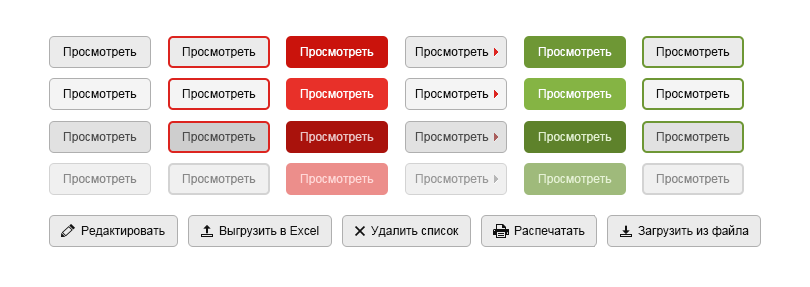
<style>
.page{position:relative;width:810px;height:287px;background:#ffffff}
.page>*{position:absolute;margin:0}
.t1{font:12px "ArialMT";color:#111111}
.t2{font:12px "ArialMT";color:#ffffff}
.t3{font:12px "ArialMT";color:#4c4c4c}
.t4{font:12px "ArialMT";color:#edc2c2}
.t5{font:12px "ArialMT";color:#e1f0cd}
.t6{font:12px "ArialMT";color:#888888}
.t7{font:12px "ArialMT";color:#ffd8d7}
.t8{font:12px "ArialMT";color:#999999}
.t9{font:12px "ArialMT";color:#e5f1d4}
</style>
<div class="page">
<p class="t1" style="left:63px;top:47px;width:74px;height:11px">Просмотреть</p>
<p class="t1" style="left:182px;top:47px;width:74px;height:11px">Просмотреть</p>
<p class="t2" style="left:300px;top:47px;width:74px;height:11px">Просмотреть</p>
<p class="t1" style="left:415px;top:47px;width:74px;height:11px">Просмотреть</p>
<p class="t2" style="left:538px;top:47px;width:74px;height:11px">Просмотреть</p>
<p class="t1" style="left:656px;top:47px;width:74px;height:11px">Просмотреть</p>
<p class="t1" style="left:63px;top:89px;width:74px;height:11px">Просмотреть</p>
<p class="t1" style="left:182px;top:89px;width:74px;height:11px">Просмотреть</p>
<p class="t2" style="left:300px;top:89px;width:74px;height:11px">Просмотреть</p>
<p class="t1" style="left:415px;top:89px;width:74px;height:11px">Просмотреть</p>
<p class="t2" style="left:538px;top:89px;width:74px;height:11px">Просмотреть</p>
<p class="t1" style="left:656px;top:89px;width:74px;height:11px">Просмотреть</p>
<p class="t3" style="left:63px;top:132px;width:74px;height:11px">Просмотреть</p>
<p class="t3" style="left:182px;top:132px;width:74px;height:11px">Просмотреть</p>
<p class="t4" style="left:300px;top:132px;width:74px;height:11px">Просмотреть</p>
<p class="t3" style="left:415px;top:132px;width:74px;height:11px">Просмотреть</p>
<p class="t5" style="left:538px;top:132px;width:74px;height:11px">Просмотреть</p>
<p class="t3" style="left:656px;top:132px;width:74px;height:11px">Просмотреть</p>
<p class="t6" style="left:63px;top:174px;width:74px;height:11px">Просмотреть</p>
<p class="t6" style="left:182px;top:174px;width:74px;height:11px">Просмотреть</p>
<p class="t7" style="left:300px;top:174px;width:74px;height:11px">Просмотреть</p>
<p class="t8" style="left:415px;top:174px;width:74px;height:11px">Просмотреть</p>
<p class="t9" style="left:538px;top:174px;width:74px;height:11px">Просмотреть</p>
<p class="t6" style="left:656px;top:174px;width:74px;height:11px">Просмотреть</p>
<p class="t1" style="left:81px;top:226px;width:84px;height:11px">Редактировать</p>
<p class="t1" style="left:219px;top:226px;width:100px;height:11px">Выгрузить в Excel</p>
<p class="t1" style="left:371px;top:226px;width:88px;height:11px">Удалить список</p>
<p class="t1" style="left:514px;top:226px;width:71px;height:9px">Распечатать</p>
<p class="t1" style="left:638px;top:225px;width:111px;height:12px">Загрузить из файла</p>
</div>
